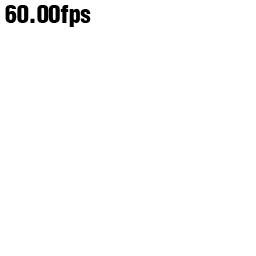
<style>
.page{position:relative;width:256px;height:256px;background:#ffffff}
.page>*{position:absolute;margin:0}
.t1{font:26.7px "Helvetica-Condensed-Black-Se";color:#000000}
</style>
<div class="page">
<p class="t1" style="left:5px;top:5px;width:86px;height:22px">60.00fps</p>
</div>
